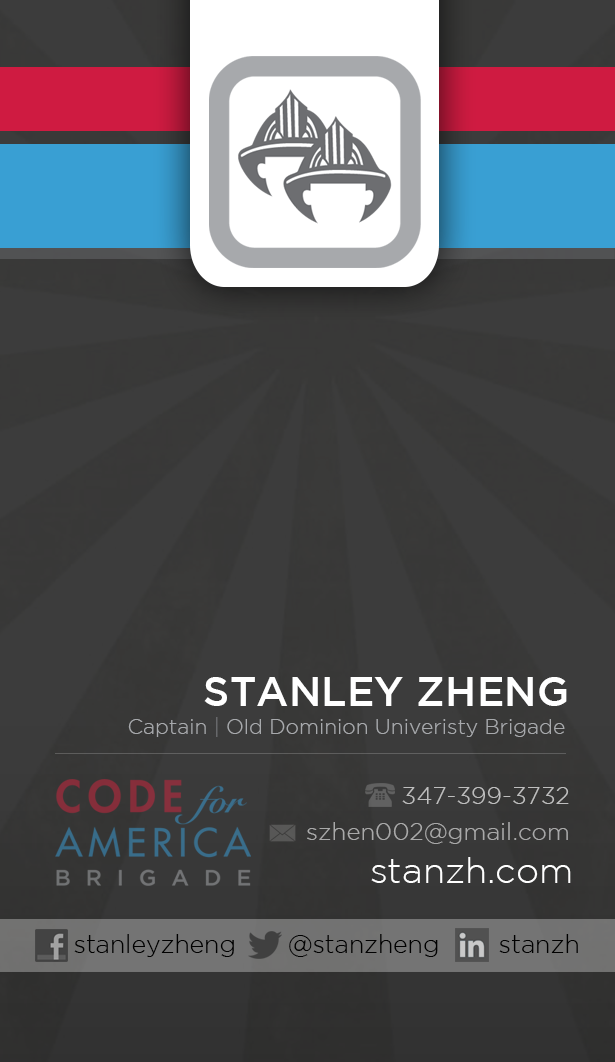
<style>
.page{position:relative;width:615px;height:1062px}
.page>*{position:absolute;margin:0}
.t1{font:41.5px "GothamMedium";color:#ffffff}
.t2{font:21.1px "GothamLight";color:#a7a9ac}
.t3{font:21.1px "GothamLight";color:#6d6e71}
.t4{font:24.1px "GothamLight";color:#bebebe}
.t5{font:24.1px "GothamLight";color:#a9a9a9}
.t6{font:36.4px "GothamLight";color:#ffffff}
.t7{font:25.6px "GothamLight";color:#000000}
</style>
<div class="page">
<p class="t1" style="left:204px;top:677px;width:363px;height:29px">STANLEY ZHENG</p>
<p class="t2" style="left:128px;top:717px;width:437px;height:20px">Captain <span class="t3">|</span> Old Dominion Univeristy Brigade</p>
<p class="t4" style="left:402px;top:787px;width:167px;height:17px">347-399-3732</p>
<p class="t5" style="left:307px;top:822px;width:261px;height:22px">szhen002@gmail.com</p>
<p class="t6" style="left:371px;top:857px;width:200px;height:26px">stanzh.com</p>
<p class="t7" style="left:74px;top:934px;width:504px;height:23px">stanleyzheng       @stanzheng        stanzh</p>
</div>
